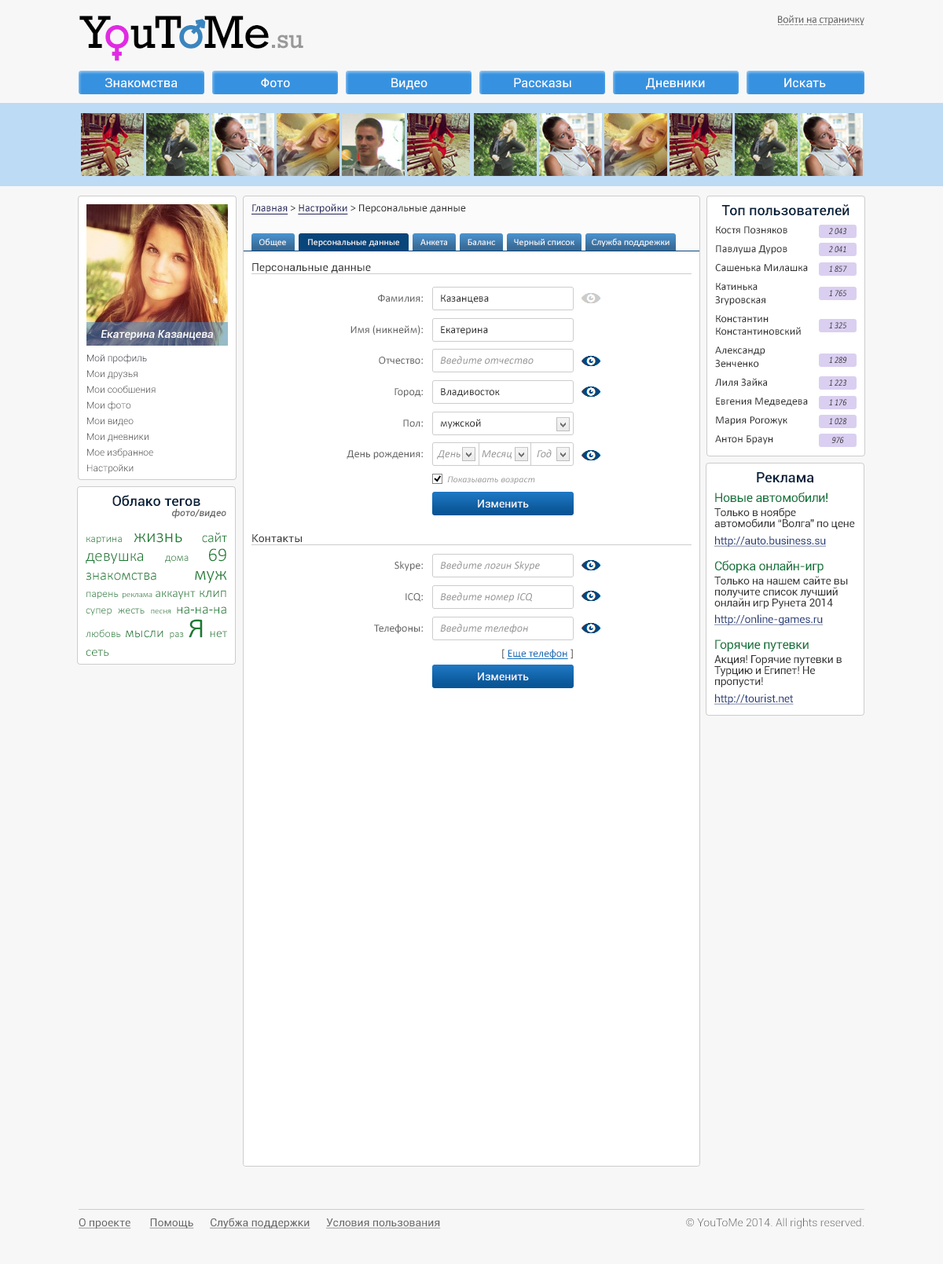
<style>
.page{position:relative;width:943px;height:1264px;background:#ffffff}
.page>*{position:absolute;margin:0}
.t1{font:26.9px "Rockwell";letter-spacing:-0.02em;color:#999999}
.t2{font:47.1px "Rockwell";letter-spacing:-0.02em;color:#000000}
.t3{font:47.1px "Rockwell";letter-spacing:-0.02em;color:#e12ae3}
.t4{font:47.1px "Rockwell";letter-spacing:-0.02em;color:#3a85bf}
.t5{font:11px "Calibri";letter-spacing:-0.02em;color:#666666}
.t6{font:12.6px "Roboto-Regular";color:#ffffff}
.t7{font:11px "Calibri";color:#333333}
.t8{font:11px "Calibri";color:#25265d;text-decoration:underline}
.t9{font:14.1px "Roboto-Medium";color:#041f3a}
.t10{font:9.4px "Calibri-Italic";color:#2d2d2d;scale:0.83 1}
.t11{font:9.4px "Calibri";color:#ffffff}
.t12{font:11px "Roboto-Regular";color:#333333}
.t13{font:9.4px "Calibri-Italic";scale:0.83 1}
.t14{font:11px "Calibri";color:#666666}
.t15{font:11px "Roboto-MediumItalic";color:#f9f9f9}
.t16{font:9.4px/15.7px "Roboto-Light";color:#333333}
.t17{font:9.4px/15.7px "Roboto-Light";color:#080a29}
.t18{font:11px "Calibri-Italic";color:#999999}
.t19{font:9.4px "Calibri-Italic";color:#999999}
.t20{font:12.6px "Roboto-Regular";letter-spacing:-0.02em;color:#11753b}
.t21{font:9.4px "Roboto-MediumItalic";color:#666666}
.t22{font:11px "Roboto-Regular";color:#ffffff}
.t23{font:11px/11px "Roboto-Regular";letter-spacing:-0.02em;color:#333333}
.t24{font:11px "Calibri-Light";color:#197b30}
.t25{font:18.9px "Calibri-Light";color:#197b30}
.t26{font:14.1px "Calibri-Light";color:#197b30}
.t27{font:16.5px/18.9px "Calibri-Light";color:#197b30}
.t28{font:11px/18.9px "Calibri-Light";color:#197b30}
.t29{font:18.9px/18.9px "Calibri-Light";color:#197b30}
.t30{font:14.9px/18.9px "Calibri-Light";color:#197b30}
.t31{font:8.6px "Calibri-Light";color:#197b30}
.t32{font:12.6px "Calibri-Light";color:#197b30}
.t33{font:10.2px/23.6px "Calibri-Light";color:#197b30}
.t34{font:37.7px/23.6px "Calibri-Light";color:#197b30}
.t35{font:12.6px/23.6px "Calibri-Light";color:#197b30}
.t36{font:13.4px/18.9px "Calibri-Light";color:#197b30}
.t37{font:11px "Roboto-Regular";letter-spacing:-0.02em;color:#233c7a;text-decoration:underline}
.t38{font:11px "Calibri";color:#196fb8;text-decoration:underline}
.t39{font:11px "Roboto-Regular";color:#666666;text-decoration:underline}
.t40{font:11px "Roboto-Light";color:#666666}
</style>
<div class="page">
<p class="t1" style="left:79px;top:16px;width:224px;height:33px"><span class="t2">Y</span><span class="t3">o</span><span class="t2">uT</span><span class="t4">o</span><span class="t2">Me</span>.su</p>
<p class="t5" style="left:778px;top:15px;width:86px;height:10px">Войти на страничку</p>
<p class="t6" style="left:105px;top:78px;width:73px;height:10px">Знакомства</p>
<p class="t6" style="left:261px;top:78px;width:29px;height:9px">Фото</p>
<p class="t6" style="left:391px;top:78px;width:37px;height:12px">Видео</p>
<p class="t6" style="left:514px;top:78px;width:57px;height:10px">Рассказы</p>
<p class="t6" style="left:646px;top:78px;width:59px;height:12px">Дневники</p>
<p class="t6" style="left:784px;top:78px;width:42px;height:10px">Искать</p>
<p class="t7" style="left:251px;top:204px;width:215px;height:11px"><span class="t8">Главная </span>&gt; <span class="t8">Настройки</span> &gt; Персональные данные</p>
<p class="t9" style="left:721px;top:204px;width:129px;height:12px">Топ пользователей</p>
<p class="t7" style="left:715px;top:226px;width:93px;height:219px">Костя Позняков<br><br>Павлуша Дуров<br><br>Сашенька Милашка<br><br>Катинька Згуровская<br><br>Константин Константиновский<br><br>Александр Зенченко<br><br>Лиля Зайка<br><br>Евгения Медведева<br><br>Мария Рогожук<br><br>Антон Браун</p>
<p class="t10" style="left:829px;top:228px;width:17px;height:6px">2 043</p>
<p class="t11" style="left:259px;top:238px;width:27px;height:9px">Общее</p>
<p class="t11" style="left:308px;top:239px;width:91px;height:8px">Персональные данные</p>
<p class="t11" style="left:420px;top:239px;width:27px;height:6px">Анкета</p>
<p class="t11" style="left:468px;top:239px;width:27px;height:6px">Баланс</p>
<p class="t11" style="left:514px;top:239px;width:60px;height:8px">Черный список</p>
<p class="t11" style="left:592px;top:238px;width:78px;height:9px">Служба поддрежки</p>
<p class="t10" style="left:829px;top:246px;width:17px;height:6px">2 041</p>
<p class="t12" style="left:252px;top:263px;width:119px;height:10px">Персональные данные</p>
<p class="t13" style="left:829px;top:266px;width:18px;height:6px">1 857</p>
<p class="t14" style="left:378px;top:294px;width:45px;height:9px">Фамилия:</p>
<p class="t13" style="left:829px;top:290px;width:17px;height:6px">1 765</p>
<p class="t7" style="left:441px;top:295px;width:48px;height:9px">Казанцева</p>
<p class="t14" style="left:350px;top:325px;width:73px;height:11px">Имя (никнейм):</p>
<p class="t7" style="left:441px;top:326px;width:47px;height:10px">Екатерина</p>
<p class="t13" style="left:829px;top:322px;width:17px;height:6px">1 325</p>
<p class="t15" style="left:101px;top:330px;width:112px;height:10px">Екатерина Казанцева</p>
<p class="t16" style="left:87px;top:354px;width:69px;height:120px;text-align:justify"><span class="t17">Мой профиль<br></span>Мои друзья<br>Мои сообщения<br>Мои фото<br>Мои видео<br>Мои дневники<br>Мое избранное<br>Настройки</p>
<p class="t14" style="left:379px;top:357px;width:44px;height:8px">Отчество:</p>
<p class="t18" style="left:440px;top:356px;width:94px;height:9px">Введите отчество</p>
<p class="t13" style="left:829px;top:357px;width:18px;height:6px">1 289</p>
<p class="t14" style="left:395px;top:388px;width:28px;height:10px">Город:</p>
<p class="t7" style="left:441px;top:388px;width:59px;height:10px">Владивосток</p>
<p class="t13" style="left:829px;top:380px;width:17px;height:6px">1 223</p>
<p class="t10" style="left:829px;top:399px;width:18px;height:7px">1 176</p>
<p class="t14" style="left:403px;top:420px;width:20px;height:8px">Пол:</p>
<p class="t7" style="left:441px;top:419px;width:40px;height:10px">мужской</p>
<p class="t13" style="left:829px;top:418px;width:18px;height:6px">1 028</p>
<p class="t13" style="left:831px;top:437px;width:13px;height:6px">976</p>
<p class="t18" style="left:537px;top:450px;width:15px;height:8px">Год</p>
<p class="t14" style="left:347px;top:450px;width:76px;height:10px">День рождения:</p>
<p class="t18" style="left:437px;top:450px;width:24px;height:10px">День</p>
<p class="t18" style="left:482px;top:450px;width:30px;height:10px">Месяц</p>
<p class="t9" style="left:757px;top:472px;width:57px;height:11px">Реклама</p>
<p class="t19" style="left:447px;top:476px;width:88px;height:8px">Показывать возраст</p>
<p class="t9" style="left:112px;top:495px;width:88px;height:12px">Облако тегов</p>
<p class="t20" style="left:715px;top:492px;width:113px;height:11px">Новые автомобили!</p>
<p class="t21" style="left:172px;top:508px;width:54px;height:11px">фото/видео</p>
<p class="t22" style="left:478px;top:500px;width:51px;height:8px">Изменить</p>
<p class="t23" style="left:714px;top:508px;width:141px;height:22px">Только в ноябре автомобили “Волга” по цене “Жигулей”</p>
<p class="t24" style="left:86px;top:532px;width:141px;height:124px;text-align:justify">картина <span class="t25">жизнь </span><span class="t26">сайт </span><span class="t27">девушка </span><span class="t28">дома </span><span class="t29">69 </span><span class="t30">знакомства </span><span class="t29">муж </span>парень <span class="t31">реклама </span><span class="t32">аккаунт </span><span class="t26">клип </span>супер жесть <span class="t31">песня </span><span class="t26">на-на-на </span>любовь <span class="t26">мысли </span><span class="t33">раз </span><span class="t34">я </span><span class="t35">нет </span><span class="t36">сеть</span></p>
<p class="t12" style="left:252px;top:534px;width:50px;height:9px">Контакты</p>
<p class="t37" style="left:714px;top:536px;width:112px;height:11px">http://auto.business.su</p>
<p class="t14" style="left:395px;top:561px;width:28px;height:10px">Skype:</p>
<p class="t18" style="left:440px;top:561px;width:100px;height:10px">Введите логин Skype</p>
<p class="t20" style="left:715px;top:560px;width:109px;height:14px">Сборка онлайн-игр</p>
<p class="t23" style="left:714px;top:576px;width:134px;height:33px">Только на нашем сайте вы получите список лучший онлайн игр Рунета 2014 года</p>
<p class="t14" style="left:406px;top:593px;width:17px;height:9px">ICQ:</p>
<p class="t18" style="left:440px;top:593px;width:92px;height:10px">Введите номер ICQ</p>
<p class="t37" style="left:714px;top:615px;width:110px;height:11px">http://online-games.ru</p>
<p class="t14" style="left:374px;top:624px;width:49px;height:10px">Телефоны:</p>
<p class="t18" style="left:440px;top:624px;width:88px;height:10px">Введите телефон</p>
<p class="t20" style="left:715px;top:640px;width:94px;height:12px">Горячие путевки</p>
<p class="t38" style="left:502px;top:649px;width:71px;height:10px"><span class="t7">[ </span>Еще телефон<span class="t7"> ]</span></p>
<p class="t23" style="left:714px;top:655px;width:128px;height:33px">Акция! Горячие путевки в Турцию и Египет! Не пропусти!</p>
<p class="t22" style="left:478px;top:673px;width:51px;height:8px">Изменить</p>
<p class="t37" style="left:714px;top:694px;width:80px;height:11px">http://tourist.net</p>
<p class="t39" style="left:79px;top:1218px;width:362px;height:11px">О проекте       Помощь      Слубжа поддержки      Условия пользования</p>
<p class="t40" style="left:686px;top:1218px;width:178px;height:11px">© YouToMe 2014. All rights reserved.</p>
</div>
